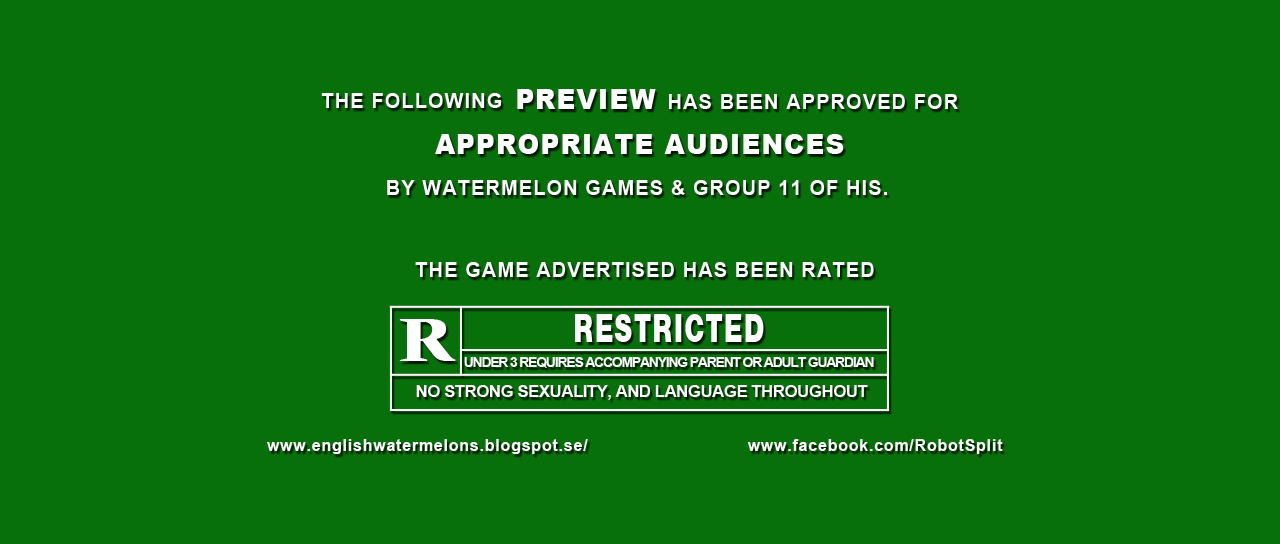
<style>
.page{position:relative;width:1280px;height:544px;background:#08700b}
.page>*{position:absolute;margin:0}
.t1{font:28.4px "Arial-Black";letter-spacing:0.04em;color:#ffffff;scale:0.92 1}
.t2{font:21.4px "Arial-BoldMT";letter-spacing:0.055em;color:#ffffff;scale:0.93 1}
.t3{font:41.1px "NimbusSansNovusTBlack";letter-spacing:0.055em;color:#ffffff;scale:0.68 1}
.t4{font:66.6px "VeljovicStd-Black";letter-spacing:0.055em;color:#ffffff}
.t5{font:14.5px "Arial-BoldMT";letter-spacing:-0.078em;color:#ffffff;scale:0.95 1}
.t6{font:17.1px "Arial-BoldMT";letter-spacing:-0.04em;color:#ffffff}
.t7{font:16.7px "Arial-BoldMT";letter-spacing:0.055em;color:#ffffff;scale:0.95 1}
</style>
<div class="page">
<p class="t1" style="left:517px;top:89px;width:139px;height:20px">PREVIEW</p>
<p class="t2" style="left:321px;top:93px;width:180px;height:15px">THE FOLLOWING</p>
<p class="t2" style="left:669px;top:94px;width:289px;height:15px">HAS BEEN APPROVED FOR</p>
<p class="t1" style="left:435px;top:134px;width:409px;height:20px">APPROPRIATE AUDIENCES</p>
<p class="t2" style="left:387px;top:180px;width:500px;height:15px">BY WATERMELON GAMES &amp; GROUP 11 OF HIS.</p>
<p class="t2" style="left:415px;top:262px;width:459px;height:15px">THE GAME ADVERTISED HAS BEEN RATED</p>
<p class="t3" style="left:575px;top:314px;width:189px;height:28px">RESTRICTED</p>
<p class="t4" style="left:399px;top:319px;width:57px;height:42px">R</p>
<p class="t5" style="left:464px;top:357px;width:410px;height:11px">UNDER 3 REQUIRES ACCOMPANYING PARENT OR ADULT GUARDIAN</p>
<p class="t6" style="left:416px;top:385px;width:452px;height:15px">NO STRONG SEXUALITY, AND LANGUAGE THROUGHOUT</p>
<p class="t7" style="left:267px;top:439px;width:321px;height:15px">www.englishwatermelons.blogspot.se/</p>
<p class="t7" style="left:747px;top:439px;width:256px;height:15px">www.facebook.com/RobotSplit</p>
</div>
